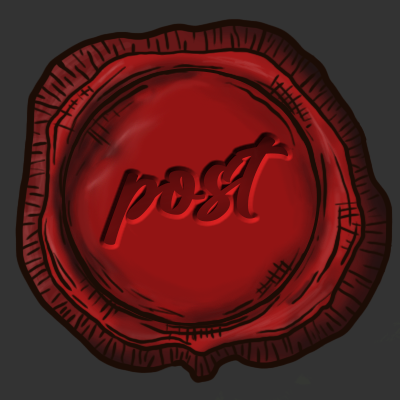
<style>
.page{position:relative;width:400px;height:400px;background:#333333}
.page>*{position:absolute;margin:0}
.t1{font:104.5px "BillionDreams";color:#620d0d;scale:1.21 1}
</style>
<div class="page">
<p class="t1" style="left:103px;top:136px;width:186px;height:109px;rotate:-6deg">post</p>
</div>
